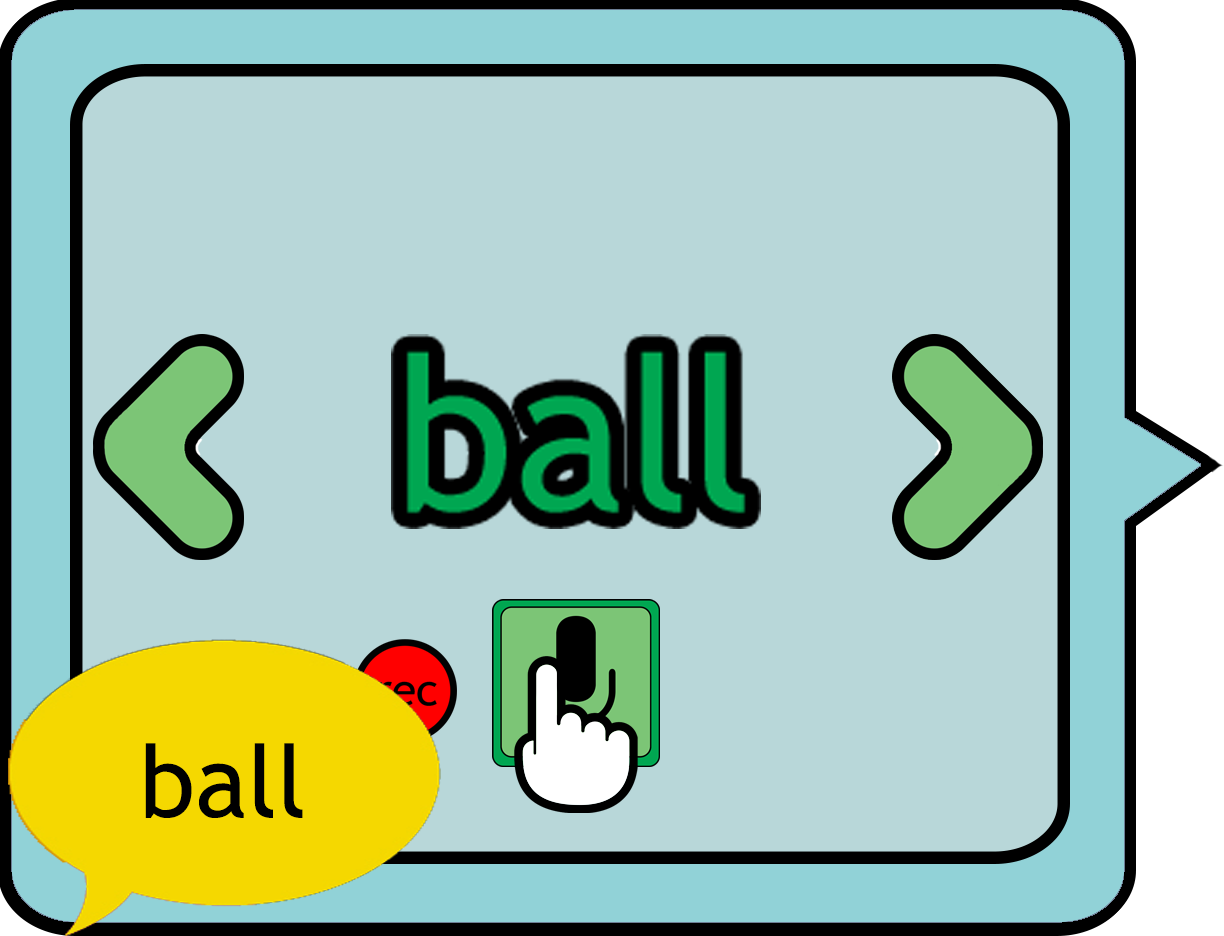
<style>
.page{position:relative;width:1224px;height:936px;background:#b8d7d9}
.page>*{position:absolute;margin:0}
.t1{font:100px "TrebuchetMS";color:#000000}
</style>
<div class="page">
<p class="t1" style="left:145px;top:743px;width:158px;height:75px">ball</p>
</div>
